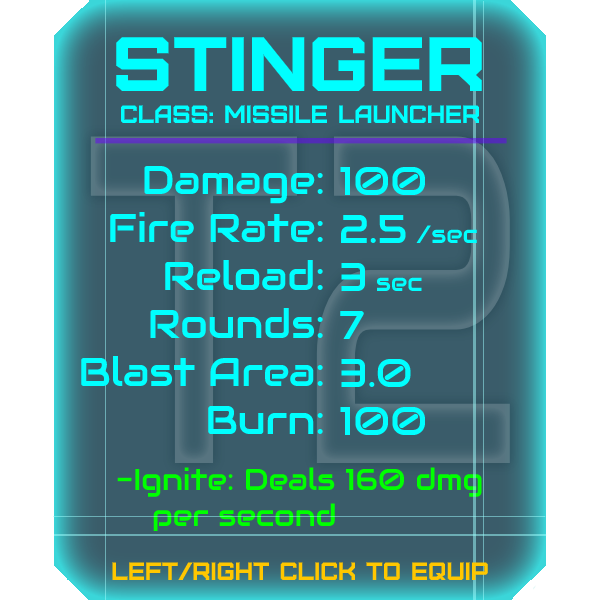
<style>
.page{position:relative;width:600px;height:600px;background:#3a5c6a}
.page>*{position:absolute;margin:0}
.t1{font:76.8px "Furore";color:#00ffff;scale:1.08 1}
.t2{font:25px "Furore";color:#00ffff}
.t3{font:40px "Audiowide-Regular";color:#00ffff}
.t4{font:25px "Audiowide-Regular";color:#00ffff}
.t5{font:30px "Audiowide-Regular";color:#00ff00}
.t6{font:40px "Audiowide-Regular";color:#00ff00}
.t7{font:25px "Furore";color:#ffc700}
</style>
<div class="page">
<p class="t1" style="left:116px;top:37px;width:366px;height:54px">stinger</p>
<p class="t2" style="left:120px;top:105px;width:360px;height:18px">Class: missile launcher</p>
<p class="t3" style="left:81px;top:165px;width:242px;height:269px;text-align:right">Damage:<br>Fire Rate:<br>Reload:<br>Rounds:<br>Blast Area:<br>Burn:</p>
<p class="t3" style="left:340px;top:166px;width:137px;height:269px">100<br>2.5 <span class="t4">/sec<br></span>3 <span class="t4">sec<br></span>7<br>3.0<br>100</p>
<p class="t5" style="left:117px;top:467px;width:365px;height:64px"><span class="t6"><br><br><br><br><br><br></span>-Ignite: Deals 160 dmg<br> per second</p>
<p class="t7" style="left:112px;top:562px;width:376px;height:18px">left/right click to equip</p>
</div>
